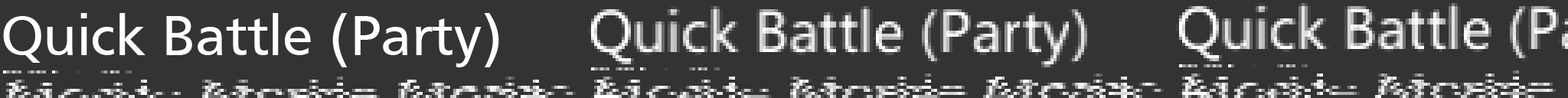
<style>
.page{position:relative;width:1568px;height:98px;background:#333333}
.page>*{position:absolute;margin:0}
.t1{font:58.3px "Frutiger";color:#ffffff}
</style>
<div class="page">
<p class="t1" style="left:3px;top:13px;width:496px;height:54px">Quick Battle (Party)</p>
</div>
